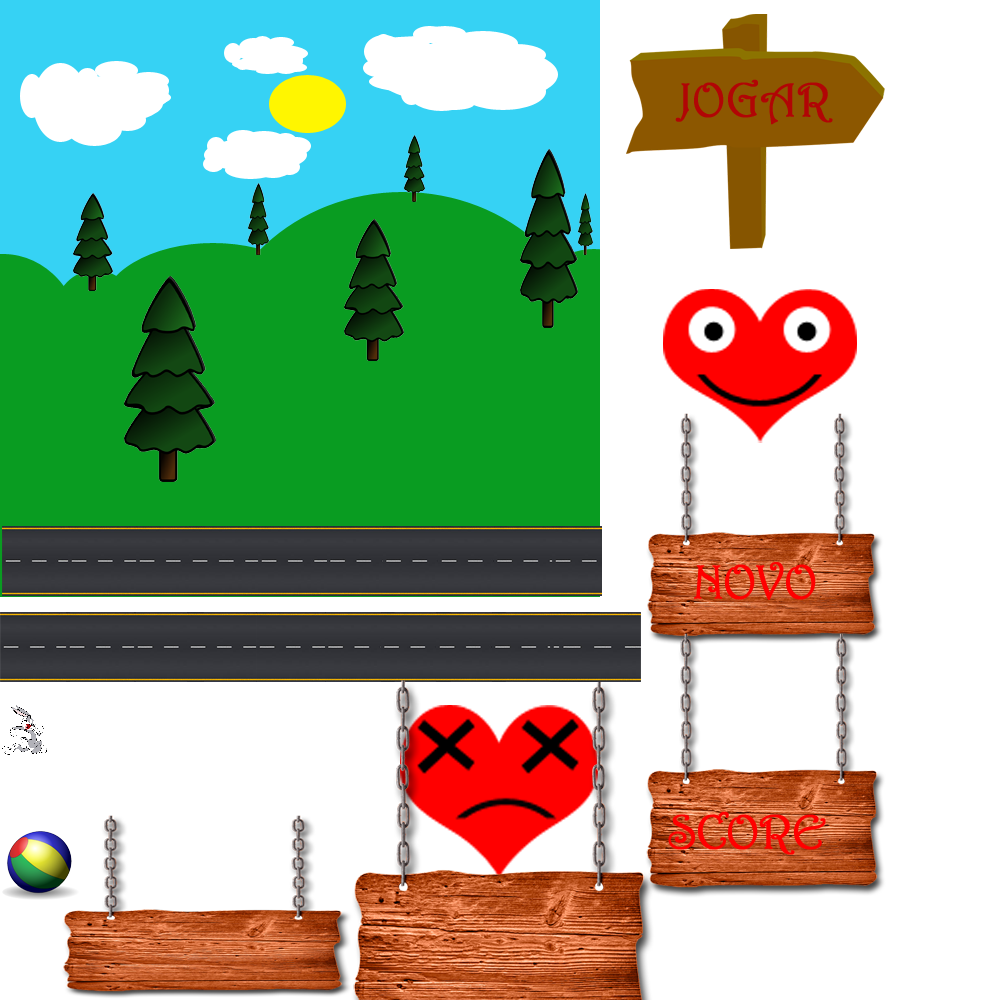
<style>
.page{position:relative;width:1000px;height:1000px;background:#ffffff}
.page>*{position:absolute;margin:0}
.t1{font:48px "Harrington";color:#ff0000;font-weight:bold}
</style>
<div class="page">
<p class="t1" style="left:694px;top:562px;width:122px;height:38px">NOVO</p>
<p class="t1" style="left:668px;top:811px;width:158px;height:44px">SCORE</p>
</div>
